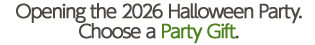
<style>
.page{position:relative;width:315px;height:45px;background:#ffffff}
.page>*{position:absolute;margin:0}
.t1{font:18px/20px "UDShinGoPro-Regular";letter-spacing:-0.08em;color:#4c4843;font-weight:bold}
.t2{font:18px/20px "UDShinGoPro-Regular";letter-spacing:-0.08em;color:#4e8120;font-weight:bold}
</style>
<div class="page">
<p class="t1" style="left:16px;top:3px;width:286px;height:41px;text-align:center">Opening the 2026 Halloween Party.<br>Choose a <span class="t2">Party Gift</span>.</p>
</div>
